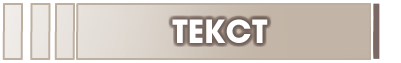
<style>
.page{position:relative;width:401px;height:63px;background:#ffffff}
.page>*{position:absolute;margin:0}
.t1{font:32px "AAvanteTckHeavy";color:#ffffff}
</style>
<div class="page">
<p class="t1" style="left:172px;top:19px;width:96px;height:24px">ТЕКСТ</p>
</div>
